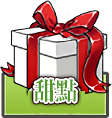
<style>
.page{position:relative;width:112px;height:118px;background:#ffffff}
.page>*{position:absolute;margin:0}
.t1{font:25px "RyuminPr6N-ExBold";color:#4f9626;scale:0.9 1}
</style>
<div class="page">
<p class="t1" style="left:34px;top:79px;width:43px;height:23px">甜點</p>
</div>
